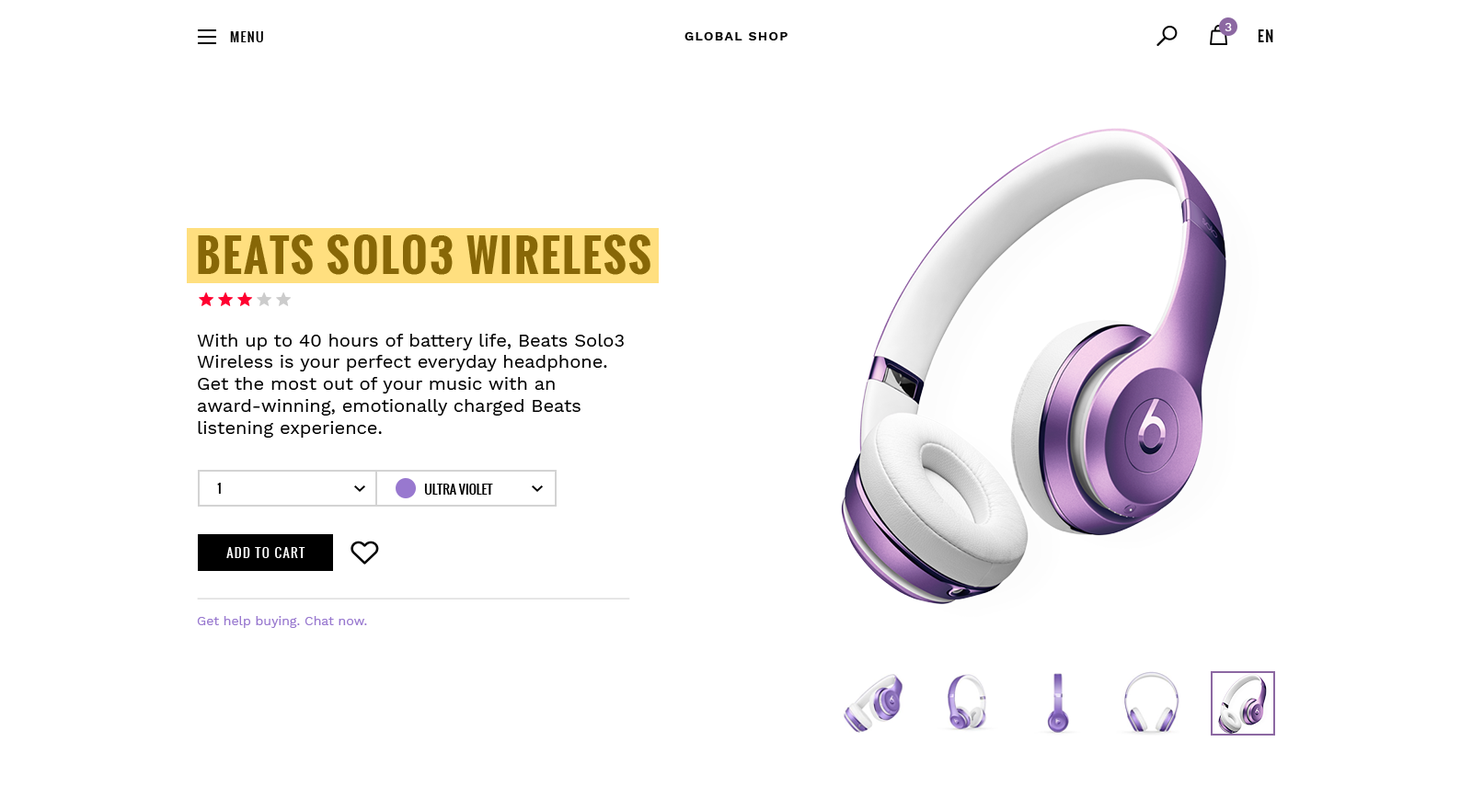
<style>
.page{position:relative;width:1472px;height:810px;background:#ffffff}
.page>*{position:absolute;margin:0}
.t1{font:12.9px "WorkSans-Medium";letter-spacing:0.1em;color:#ffffff}
.t2{font:14.7px "Oswald-Regular";letter-spacing:0.1em;color:#000000}
.t3{font:12.9px "Oswald-Regular";letter-spacing:0.1em;color:#000000}
.t4{font:12.9px "WorkSans-SemiBold";letter-spacing:0.1em;color:#000000}
.t5{font:44.1px "Oswald-Bold";letter-spacing:0.05em;color:#876707;text-transform:uppercase}
.t6{font:18.4px/22.1px "WorkSans-Regular";color:#000000}
.t7{font:12.9px "Oswald-Regular";color:#000000;text-transform:uppercase}
.t8{font:12.9px "Oswald-Regular";letter-spacing:0.1em;color:#ffffff}
.t9{font:12.9px "WorkSans-Regular";color:#9878cf}
</style>
<div class="page">
<p class="t1" style="left:1224px;top:23px;width:8px;height:8px">3</p>
<p class="t2" style="left:1257px;top:29px;width:16px;height:13px">EN</p>
<p class="t3" style="left:230px;top:31px;width:33px;height:11px">MENU</p>
<p class="t4" style="left:684px;top:32px;width:103px;height:8px">GLOBAL SHOP</p>
<p class="t5" style="left:198px;top:235px;width:452px;height:40px">Beats Solo3 wireless</p>
<p class="t6" style="left:197px;top:334px;width:427px;height:104px">With up to 40 hours of battery life, Beats Solo3 Wireless is your perfect everyday headphone. Get the most out of your music with an award-winning, emotionally charged Beats listening experience.</p>
<p class="t3" style="left:217px;top:483px;width:4px;height:11px">1</p>
<p class="t7" style="left:424px;top:484px;width:69px;height:11px">Ultra Violet</p>
<p class="t8" style="left:226px;top:547px;width:79px;height:11px">ADD TO CART</p>
<p class="t9" style="left:197px;top:616px;width:170px;height:12px">Get help buying. Chat now.</p>
</div>
